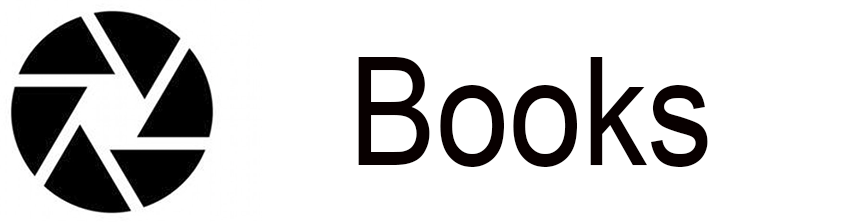
<style>
.page{position:relative;width:858px;height:222px;background:#ffffff}
.page>*{position:absolute;margin:0}
.t1{font:150.4px "ArialMT";color:#080000;scale:0.87 1}
</style>
<div class="page">
<p class="t1" style="left:358px;top:57px;width:350px;height:110px">Books</p>
</div>
